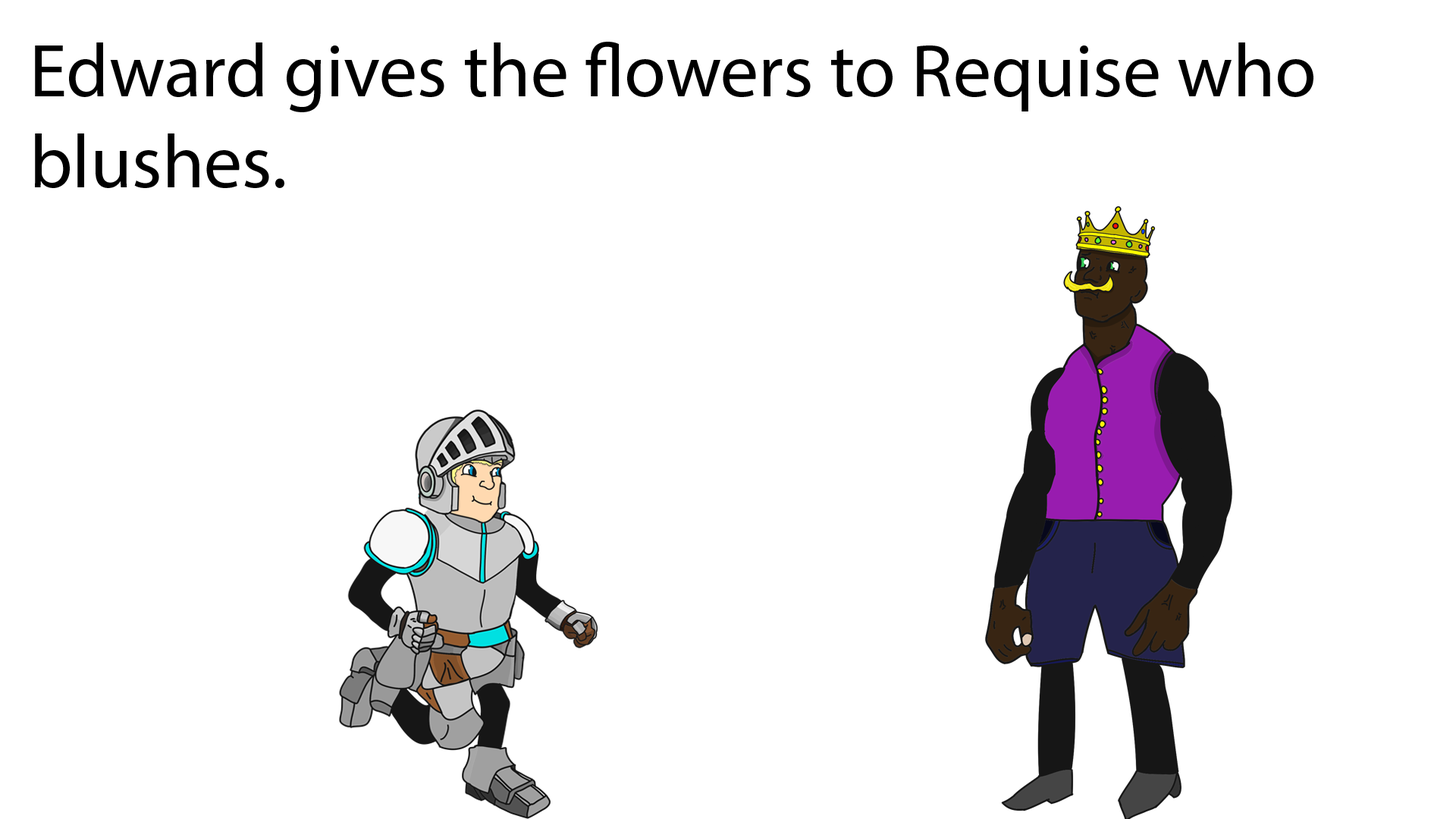
<style>
.page{position:relative;width:1456px;height:819px;background:#ffffff}
.page>*{position:absolute;margin:0}
.t1{font:75.8px "MyriadPro-Regular";color:#000000}
</style>
<div class="page">
<p class="t1" style="left:35px;top:42px;width:1278px;height:146px">Edward gives the flowers to Requise who blushes.</p>
</div>
